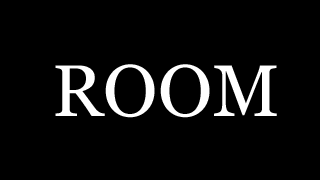
<style>
.page{position:relative;width:320px;height:180px;background:#000000}
.page>*{position:absolute;margin:0}
.t1{font:72.8px "Georgia";color:#ffffff}
</style>
<div class="page">
<p class="t1" style="left:55px;top:64px;width:222px;height:54px">ROOM</p>
</div>
